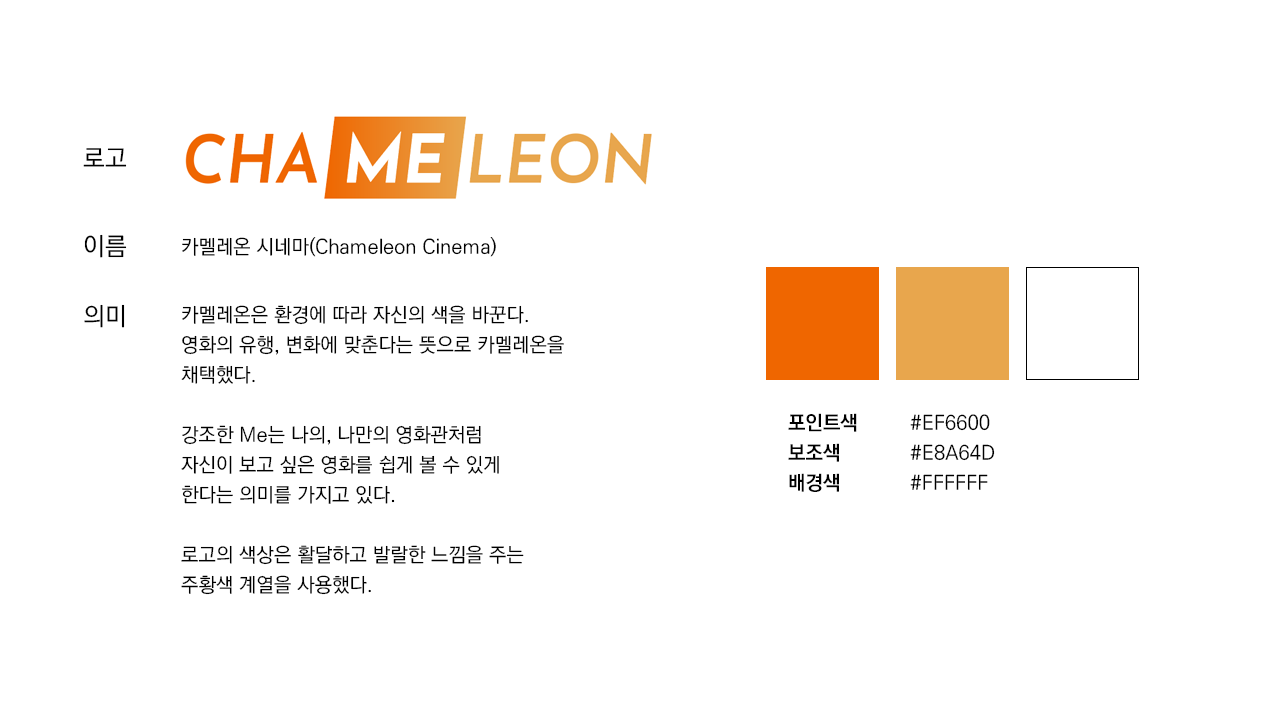
<style>
.page{position:relative;width:1280px;height:720px;background:#ffffff}
.page>*{position:absolute;margin:0}
.t1{font:25px "KoPubWorldDotumMedium";color:#000000}
.t2{font:20px "KoPubWorldDotumMedium";color:#000000}
.t3{font:20px/30px "KoPubWorldDotumMedium";color:#000000}
.t4{font:20px/30px "KoPubWorldDotumBold";color:#000000}
</style>
<div class="page">
<p class="t1" style="left:83px;top:148px;width:44px;height:19px">로고</p>
<p class="t1" style="left:84px;top:234px;width:43px;height:24px">이름</p>
<p class="t2" style="left:182px;top:237px;width:314px;height:20px">카멜레온 시네마(Chameleon Cinema)</p>
<p class="t1" style="left:84px;top:304px;width:41px;height:24px">의미</p>
<p class="t3" style="left:181px;top:305px;width:383px;height:290px">카멜레온은 환경에 따라 자신의 색을 바꾼다.<br>영화의 유행, 변화에 맞춘다는 뜻으로 카멜레온을<br>채택했다.<br><br>강조한 Me는 나의, 나만의 영화관처럼<br>자신이 보고 싶은 영화를 쉽게 볼 수 있게<br>한다는 의미를 가지고 있다.<br><br>로고의 색상은 활달하고 발랄한 느낌을 주는<br>주황색 계열을 사용했다.</p>
<p class="t4" style="left:788px;top:413px;width:69px;height:79px">포인트색<br>보조색<br>배경색</p>
<p class="t3" style="left:910px;top:414px;width:85px;height:76px">#EF6600<br>#E8A64D<br>#FFFFFF</p>
</div>
